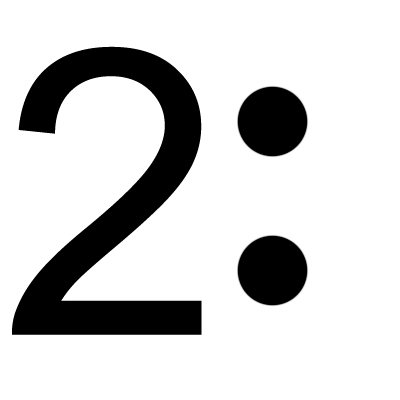
<style>
.page{position:relative;width:400px;height:400px;background:#ffffff}
.page>*{position:absolute;margin:0}
.t1{font:400.2px "ArialMT";color:#000000}
</style>
<div class="page">
<p class="t1" style="left:12px;top:46px;width:190px;height:289px">2</p>
</div>
